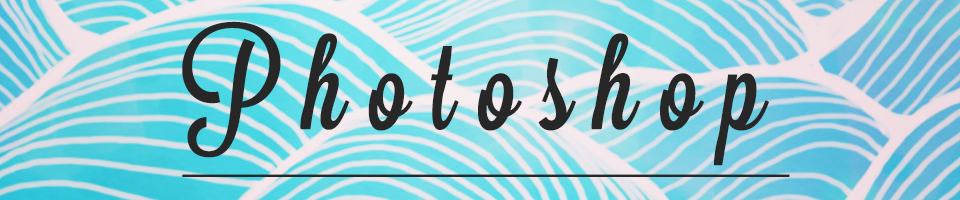
<style>
.page{position:relative;width:960px;height:200px}
.page>*{position:absolute;margin:0}
.t1{font:120px "Lavanderia-Sturdy";letter-spacing:0.2em;color:#282728;text-decoration:underline}
</style>
<div class="page">
<p class="t1" style="left:182px;top:21px;width:608px;height:156px">Photoshop</p>
</div>
